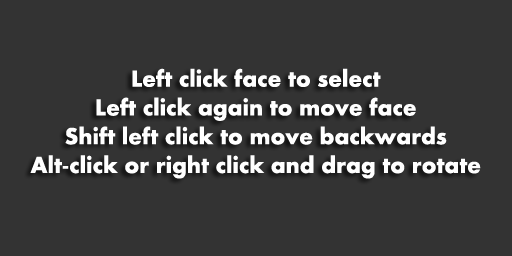
<style>
.page{position:relative;width:512px;height:256px;background:#333333}
.page>*{position:absolute;margin:0}
.t1{font:24px "Aharoni-Bold";color:#ffffff}
</style>
<div class="page">
<p class="t1" style="left:30px;top:68px;width:451px;height:111px;text-align:center">Left click face to select<br>Left click again to move face<br>Shift left click to move backwards<br>Alt-click or right click and drag to rotate</p>
</div>
